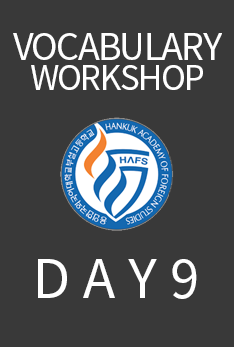
<style>
.page{position:relative;width:234px;height:347px;background:#393939}
.page>*{position:absolute;margin:0}
.t1{font:36px/32px "NotoSansKR-Regular";letter-spacing:-0.05em;color:#ffffff}
.t2{font:33.3px/32px "NotoSansKR-Regular";letter-spacing:-0.05em;color:#ffffff}
.t3{font:53.3px "NotoSansKR-Regular";letter-spacing:0.25em;color:#ffffff}
</style>
<div class="page">
<p class="t1" style="left:13px;top:33px;width:209px;height:57px;text-align:center">VOCABULARY<br><span class="t2">WORKSHOP</span></p>
<p class="t3" style="left:38px;top:259px;width:159px;height:40px">DAY9</p>
</div>
